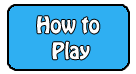
<style>
.page{position:relative;width:136px;height:74px;background:#2faff2}
.page>*{position:absolute;margin:0}
.t1{font:20px/6px "HoboStd";color:#fdfdfd}
</style>
<div class="page">
<p class="t1" style="left:37px;top:16px;width:63px;height:44px;text-align:center">How to <br>Play</p>
</div>
